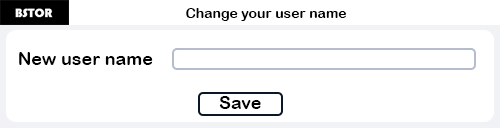
<style>
.page{position:relative;width:500px;height:128px;background:#ffffff}
.page>*{position:absolute;margin:0}
.t1{font:14px "ArialRoundedMTBold";color:#000000}
.t2{font:18px "ArialRoundedMTBold";color:#000000}
</style>
<div class="page">
<p class="t1" style="left:186px;top:8px;width:160px;height:13px">Change your user name</p>
<p class="t2" style="left:19px;top:52px;width:134px;height:13px">New user name</p>
<p class="t2" style="left:219px;top:96px;width:42px;height:13px">Save</p>
</div>
